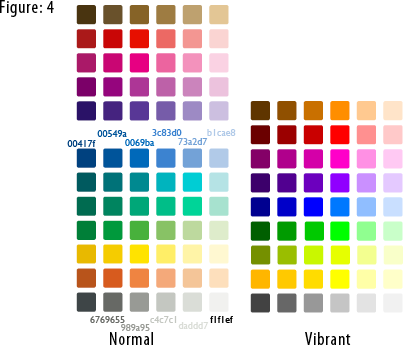
<style>
.page{position:relative;width:403px;height:350px;background:#ffffff}
.page>*{position:absolute;margin:0}
.t1{font:10px "GillSans";color:#00549a}
.t2{font:10px "GillSans";color:#3c83d0}
.t3{font:10px "GillSans";color:#b1cae8}
.t4{font:10px "GillSans";color:#00417f}
.t5{font:10px "GillSans";color:#0069ba}
.t6{font:10px "GillSans";color:#73a2d7}
.t7{font:10px "GillSans";color:#676965}
.t8{font:10px "GillSans";color:#c4c7c1}
.t9{font:10px "GillSans";color:#000000}
.t10{font:10px "GillSans";color:#989a95}
.t11{font:10px "GillSans";color:#daddd7}
</style>
<div class="page">
<p class="t1" style="left:97px;top:130px;width:30px;height:7px">00549a</p>
<p class="t2" style="left:152px;top:129px;width:30px;height:7px">3c83d0</p>
<p class="t3" style="left:207px;top:129px;width:29px;height:7px">b1cae8</p>
<p class="t4" style="left:67px;top:140px;width:29px;height:7px">00417f</p>
<p class="t5" style="left:125px;top:139px;width:30px;height:7px">0069ba</p>
<p class="t6" style="left:178px;top:138px;width:30px;height:7px">73a2d7</p>
<p class="t7" style="left:90px;top:316px;width:35px;height:7px">6769655</p>
<p class="t8" style="left:150px;top:316px;width:27px;height:7px">c4c7c1</p>
<p class="t9" style="left:210px;top:316px;width:23px;height:7px">f1f1ef</p>
<p class="t10" style="left:121px;top:324px;width:29px;height:7px">989a95</p>
<p class="t11" style="left:178px;top:322px;width:31px;height:7px">daddd7</p>
</div>
